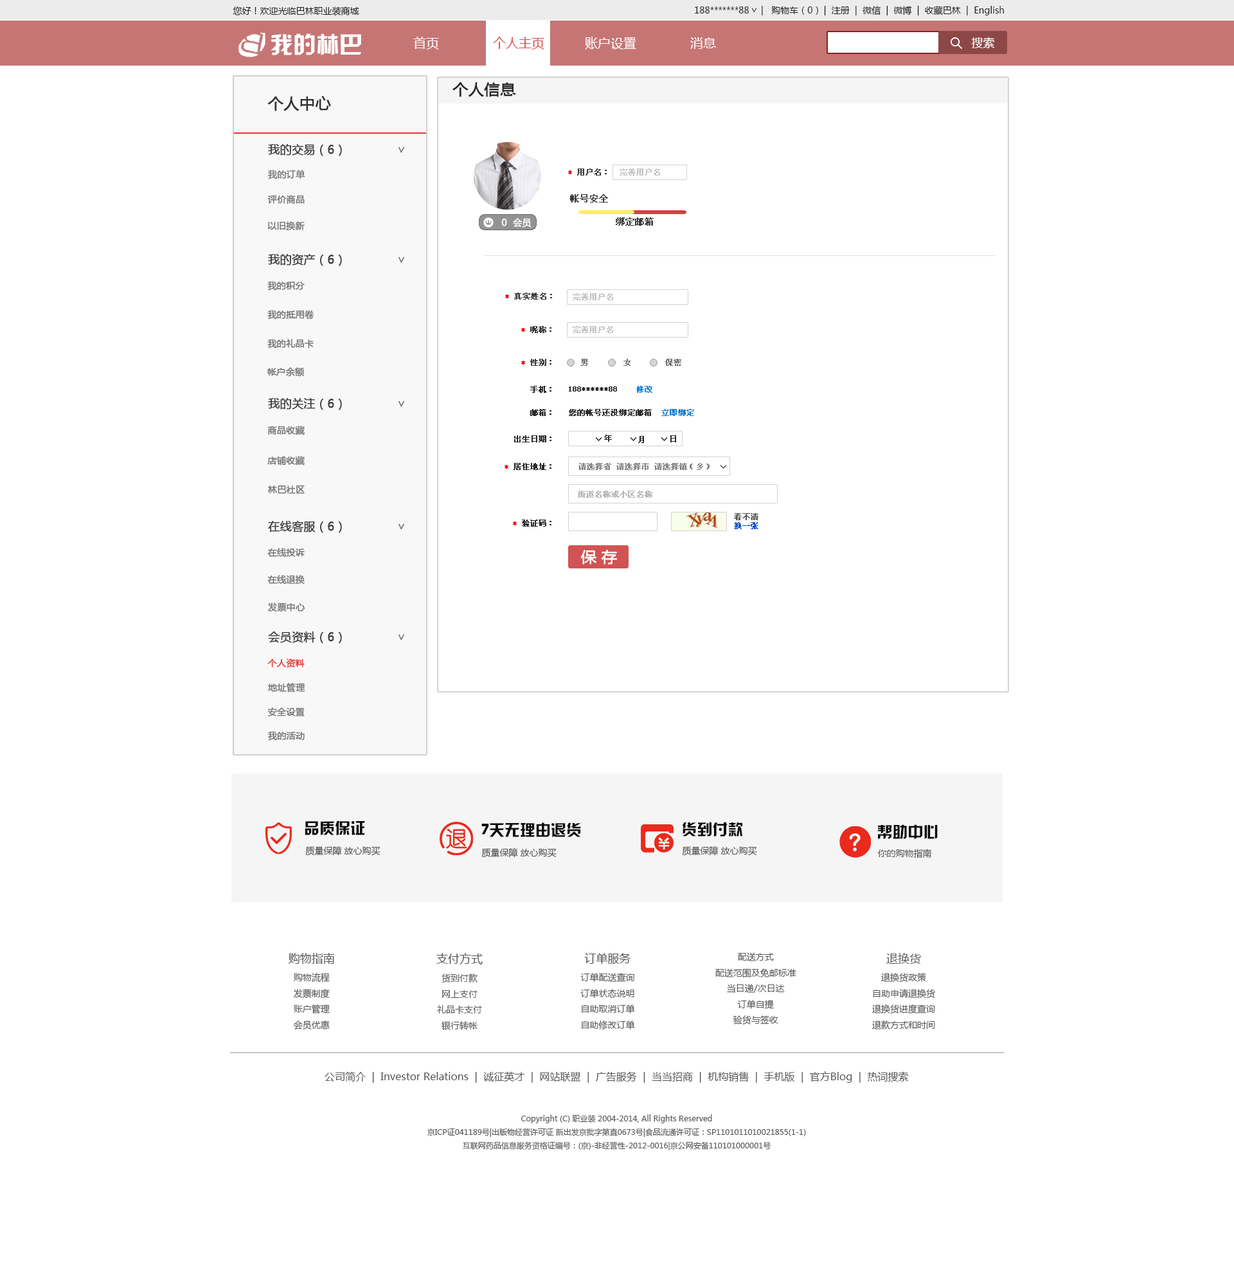
<style>
.page{position:relative;width:1234px;height:1286px;background:#ffffff}
.page>*{position:absolute;margin:0}
.t1{font:9px "MicrosoftYaHei";color:#1e1e1e}
.t2{font:9.2px "MicrosoftYaHei";scale:0.94 1}
.t3{font:23.1px "HYk2gj";color:#ffffff}
.t4{font:12.9px "MicrosoftYaHei";color:#ffffff}
.t5{font:12.9px "MicrosoftYaHei";color:#da4949}
.t6{font:11.6px "MicrosoftYaHei";color:#ffffff}
.t7{font:15.4px "MicrosoftYaHei";color:#282828;font-weight:bold}
.t8{font:15.4px "MicrosoftYaHei";color:#323232;font-weight:bold}
.t9{font:11.6px "MicrosoftYaHei";color:#434343;font-weight:bold}
.t10{font:11.6px "MicrosoftYaHei";color:#787878;font-weight:bold}
.t11{font:9px "MicrosoftYaHei";color:#7c7c7c;font-weight:bold}
.t12{font:7.7px "SimSun";color:#3c3c3c;font-weight:bold}
.t13{font:7.7px "SimSun";color:#f90f0f;font-weight:bold}
.t14{font:7.7px "SimSun";color:#c3c3c3;font-weight:bold}
.t15{font:9px "MicrosoftYaHei";color:#787878;font-weight:bold}
.t16{font:9px "SimSun";color:#3c3c3c;font-weight:bold}
.t17{font:9px "MicrosoftYaHei";color:#fefefe;font-weight:bold}
.t18{font:9px "SimSun";color:#3b3b3b;font-weight:bold}
.t19{font:7.7px "SimSun";color:#fe0000;font-weight:bold}
.t20{font:7.7px "SimSun";color:#ff0000;font-weight:bold}
.t21{font:7.7px "SimSun";color:#6f6f6f;font-weight:bold}
.t22{font:7.7px "SimSun";color:#2b2a2a;font-weight:bold}
.t23{font:7.7px "SimSun";color:#1a88dd;font-weight:bold}
.t24{font:7.7px "SimSun";color:#137ac9;font-weight:bold}
.t25{font:7.7px "SimSun";color:#828282;font-weight:bold}
.t26{font:7.7px "SimSun";color:#555555;font-weight:bold}
.t27{font:7.7px "SimSun";color:#b4b4b4;font-weight:bold}
.t28{font:7.7px/9px "SimSun";color:#525252;font-weight:bold}
.t29{font:7.7px/9px "SimSun";color:#1758ce;font-weight:bold}
.t30{font:15.4px "MicrosoftYaHei";color:#ffffff;font-weight:bold}
.t31{font:9px "MicrosoftYaHei";color:#eb3333;font-weight:bold}
.t32{font:15.4px "HYk2gj";color:#080808}
.t33{font:15.4px "HYk2gj";color:#090909}
.t34{font:15.4px "HYk2gj";color:#0d0d0d}
.t35{font:15.4px "HYk2gj";color:#0b0b0b}
.t36{font:9px "MicrosoftYaHei";color:#4c4c4c}
.t37{font:9px "MicrosoftYaHei";color:#4e4e4e}
.t38{font:9px "MicrosoftYaHei";color:#505050}
.t39{font:9px "MicrosoftYaHei";color:#575757}
.t40{font:11.6px "MicrosoftYaHei";color:#575757}
.t41{font:10.3px "MicrosoftYaHei";color:#575757}
.t42{font:7.7px "MicrosoftYaHei";color:#575757}
</style>
<div class="page">
<p class="t1" style="left:695px;top:6px;width:309px;height:9px">188*******88                            |  注册  |  微信  |  微博  |  收藏巴林  |  English</p>
<p class="t1" style="left:762px;top:6px;width:56px;height:9px">|   购物车（0）</p>
<p class="t1" style="left:233px;top:6px;width:126px;height:10px">您好！欢迎光临巴林职业装商城</p>
<p class="t2" style="left:752px;top:8px;width:5px;height:5px;rotate:90deg">&gt;</p>
<p class="t3" style="left:271px;top:33px;width:90px;height:22px">我的林巴</p>
<p class="t4" style="left:413px;top:37px;width:26px;height:13px">首页</p>
<p class="t5" style="left:493px;top:37px;width:51px;height:13px">个人主页</p>
<p class="t4" style="left:585px;top:37px;width:51px;height:13px">账户设置</p>
<p class="t4" style="left:690px;top:37px;width:26px;height:12px">消息</p>
<p class="t6" style="left:971px;top:37px;width:24px;height:12px">搜索</p>
<p class="t7" style="left:453px;top:82px;width:63px;height:15px">个人信息</p>
<p class="t8" style="left:267px;top:96px;width:64px;height:15px">个人中心</p>
<p class="t9" style="left:268px;top:144px;width:74px;height:12px">我的交易（6）</p>
<p class="t10" style="left:398px;top:147px;width:7px;height:6px;rotate:90deg">&gt;</p>
<p class="t11" style="left:268px;top:170px;width:37px;height:9px">我的订单</p>
<p class="t12" style="left:568px;top:168px;width:39px;height:8px"><span class="t13">*</span> 用户名：</p>
<p class="t14" style="left:620px;top:168px;width:40px;height:8px">完善用户名</p>
<p class="t15" style="left:267px;top:195px;width:38px;height:9px">评价商品</p>
<p class="t16" style="left:570px;top:194px;width:38px;height:9px">帐号安全</p>
<p class="t15" style="left:267px;top:221px;width:38px;height:10px">以旧换新</p>
<p class="t17" style="left:501px;top:218px;width:31px;height:10px">0  会员</p>
<p class="t18" style="left:616px;top:217px;width:38px;height:9px">绑定邮箱</p>
<p class="t9" style="left:268px;top:254px;width:74px;height:12px">我的资产（6）</p>
<p class="t10" style="left:398px;top:256px;width:7px;height:7px;rotate:90deg">&gt;</p>
<p class="t15" style="left:267px;top:281px;width:38px;height:10px">我的积分</p>
<p class="t12" style="left:505px;top:292px;width:47px;height:8px"><span class="t19">*</span> 真实姓名：</p>
<p class="t14" style="left:573px;top:293px;width:40px;height:7px">完善用户名</p>
<p class="t15" style="left:267px;top:310px;width:47px;height:10px">我的抵用卷</p>
<p class="t12" style="left:521px;top:326px;width:31px;height:7px"><span class="t20">*</span> 昵称：</p>
<p class="t14" style="left:573px;top:326px;width:40px;height:7px">完善用户名</p>
<p class="t15" style="left:267px;top:339px;width:47px;height:9px">我的礼品卡</p>
<p class="t12" style="left:521px;top:359px;width:31px;height:7px"><span class="t20">* </span>性别：</p>
<p class="t21" style="left:580px;top:359px;width:8px;height:7px">男</p>
<p class="t21" style="left:624px;top:359px;width:7px;height:7px">女</p>
<p class="t21" style="left:665px;top:359px;width:16px;height:7px">保密</p>
<p class="t15" style="left:267px;top:367px;width:37px;height:10px">帐户余额</p>
<p class="t22" style="left:530px;top:386px;width:22px;height:7px">手机：</p>
<p class="t22" style="left:569px;top:386px;width:48px;height:6px">188******88</p>
<p class="t23" style="left:636px;top:386px;width:16px;height:7px">修改</p>
<p class="t9" style="left:268px;top:398px;width:74px;height:12px">我的关注（6）</p>
<p class="t10" style="left:398px;top:401px;width:7px;height:6px;rotate:90deg">&gt;</p>
<p class="t22" style="left:530px;top:409px;width:22px;height:7px">邮箱：</p>
<p class="t22" style="left:569px;top:409px;width:125px;height:7px">您的帐号还没绑定邮箱  <span class="t24">立即绑定</span></p>
<p class="t15" style="left:267px;top:426px;width:38px;height:9px">商品收藏</p>
<p class="t22" style="left:514px;top:435px;width:38px;height:7px">出生日期：</p>
<p class="t22" style="left:596px;top:437px;width:6px;height:4px;rotate:90deg">&gt;</p>
<p class="t22" style="left:604px;top:435px;width:8px;height:7px">年</p>
<p class="t22" style="left:631px;top:437px;width:5px;height:4px;rotate:90deg">&gt;</p>
<p class="t22" style="left:638px;top:436px;width:6px;height:7px">月</p>
<p class="t22" style="left:662px;top:437px;width:5px;height:4px;rotate:90deg">&gt;</p>
<p class="t22" style="left:670px;top:435px;width:6px;height:7px">日</p>
<p class="t15" style="left:267px;top:456px;width:38px;height:9px">店铺收藏</p>
<p class="t22" style="left:505px;top:463px;width:47px;height:7px"><span class="t20">*</span> 居住地址：</p>
<p class="t25" style="left:579px;top:463px;width:131px;height:7px">请选择省 请选择市 请选择镇（乡）</p>
<p class="t26" style="left:721px;top:465px;width:5px;height:4px;rotate:90deg">&gt;</p>
<p class="t15" style="left:267px;top:485px;width:38px;height:9px">林巴社区</p>
<p class="t27" style="left:578px;top:491px;width:74px;height:7px">街道名称或小区名称</p>
<p class="t9" style="left:268px;top:520px;width:74px;height:13px">在线客服（6）</p>
<p class="t22" style="left:513px;top:519px;width:39px;height:7px"><span class="t20">*</span> 验证码：</p>
<p class="t28" style="left:734px;top:513px;width:25px;height:16px">看不清<br><span class="t29">换一张</span></p>
<p class="t10" style="left:398px;top:523px;width:7px;height:7px;rotate:90deg">&gt;</p>
<p class="t15" style="left:267px;top:548px;width:38px;height:9px">在线投诉</p>
<p class="t30" style="left:580px;top:550px;width:37px;height:14px">保 存</p>
<p class="t15" style="left:267px;top:575px;width:38px;height:9px">在线退换</p>
<p class="t15" style="left:268px;top:602px;width:37px;height:10px">发票中心</p>
<p class="t9" style="left:268px;top:631px;width:74px;height:13px">会员资料（6）</p>
<p class="t10" style="left:398px;top:634px;width:7px;height:6px;rotate:90deg">&gt;</p>
<p class="t31" style="left:267px;top:658px;width:38px;height:9px">个人资料</p>
<p class="t15" style="left:267px;top:683px;width:38px;height:9px">地址管理</p>
<p class="t15" style="left:267px;top:707px;width:38px;height:10px">安全设置</p>
<p class="t15" style="left:268px;top:731px;width:37px;height:10px">我的活动</p>
<p class="t32" style="left:305px;top:821px;width:60px;height:15px">品质保证</p>
<p class="t33" style="left:682px;top:822px;width:60px;height:15px">货到付款</p>
<p class="t34" style="left:482px;top:822px;width:99px;height:15px">7天无理由退货</p>
<p class="t35" style="left:878px;top:824px;width:60px;height:15px">帮助中心</p>
<p class="t36" style="left:305px;top:846px;width:76px;height:10px">质量保障 放心购买</p>
<p class="t37" style="left:482px;top:848px;width:75px;height:10px">质量保障 放心购买</p>
<p class="t38" style="left:682px;top:846px;width:75px;height:10px">质量保障 放心购买</p>
<p class="t39" style="left:878px;top:849px;width:54px;height:9px">你的购物指南</p>
<p class="t39" style="left:288px;top:953px;width:47px;height:77px;text-align:center"><span class="t40">购物指南<br></span>购物流程<br>发票制度<br>账户管理<br>会员优惠</p>
<p class="t39" style="left:437px;top:953px;width:46px;height:77px;text-align:center"><span class="t40">支付方式<br></span>货到付款<br>网上支付<br>礼品卡支付<br>银行转帐</p>
<p class="t39" style="left:580px;top:953px;width:55px;height:77px;text-align:center"><span class="t40">订单服务<br></span>订单配送查询<br>订单状态说明<br>自助取消订单<br>自助修改订单</p>
<p class="t39" style="left:716px;top:952px;width:81px;height:73px;text-align:center">配送方式<br>配送范围及免邮标准<br>当日递/次日达<br>订单自提<br>验货与签收</p>
<p class="t39" style="left:872px;top:953px;width:63px;height:76px;text-align:center"><span class="t40">退换货<br></span>退换货政策<br>自助申请退换货<br>退换货进度查询<br>退款方式和时间</p>
<p class="t41" style="left:325px;top:1071px;width:583px;height:12px">公司简介  |  Investor Relations  |  诚征英才  |  网站联盟  |  广告服务  |  当当招商  |  机构销售  |  手机版  |  官方Blog  |  热词搜索</p>
<p class="t42" style="left:427px;top:1114px;width:379px;height:36px;text-align:center">Copyright (C) 职业装 2004-2014, All Rights Reserved<br>京ICP证041189号|出版物经营许可证 新出发京批字第直0673号|食品流通许可证：SP1101011010021855(1-1)<br>互联网药品信息服务资格证编号：(京)-非经营性-2012-0016|京公网安备110101000001号</p>
</div>
